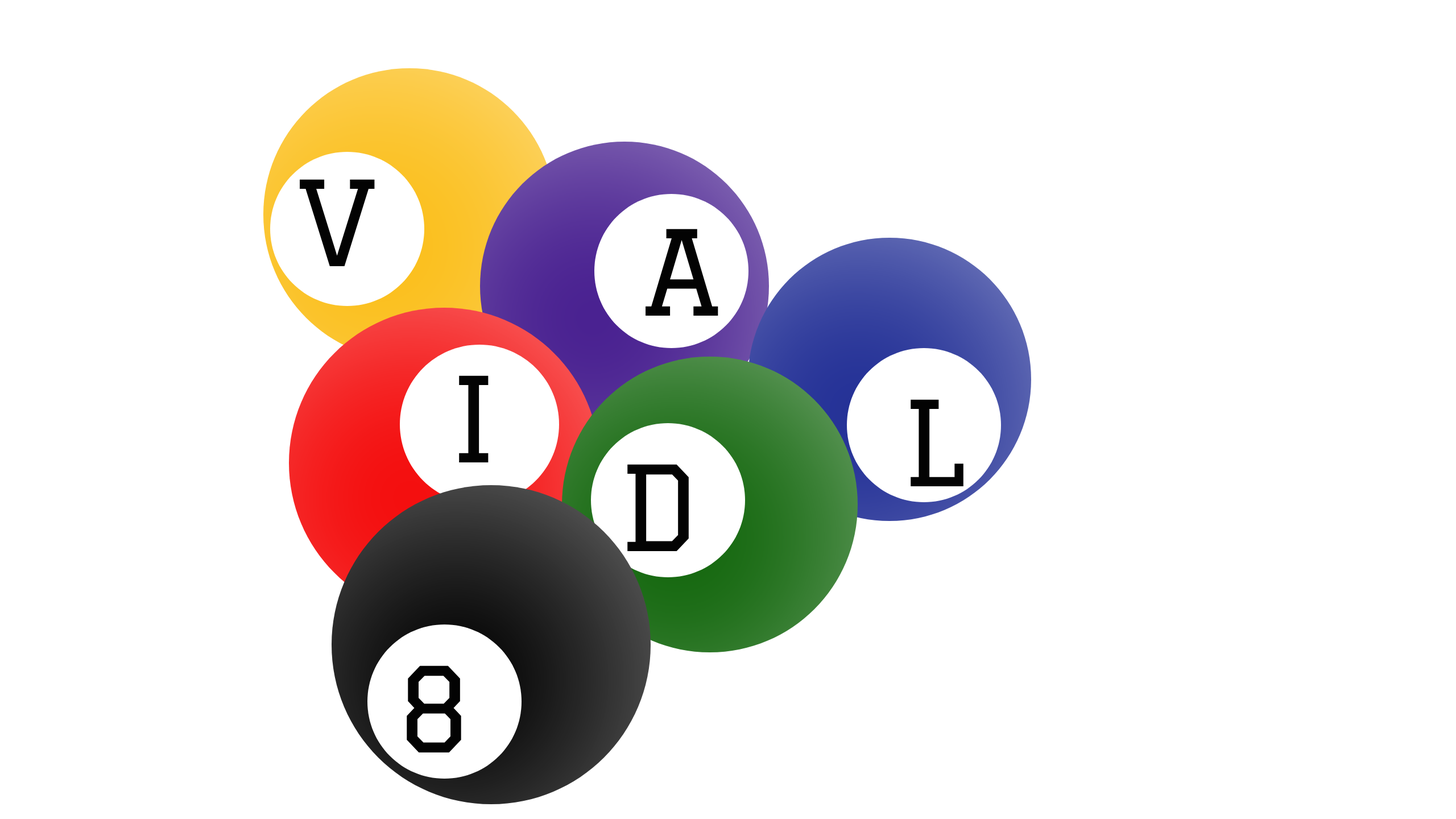
<style>
.page{position:relative;width:1456px;height:819px;background:#ffffff}
.page>*{position:absolute;margin:0}
.t1{font:115.5px "Graduate-Regular";color:#030303}
</style>
<div class="page">
<p class="t1" style="left:300px;top:179px;width:75px;height:87px">V</p>
<p class="t1" style="left:646px;top:229px;width:72px;height:87px">A</p>
<p class="t1" style="left:459px;top:375px;width:30px;height:87px">I</p>
<p class="t1" style="left:911px;top:399px;width:52px;height:87px">L</p>
<p class="t1" style="left:627px;top:464px;width:62px;height:87px">D</p>
<p class="t1" style="left:407px;top:665px;width:54px;height:87px">8</p>
</div>
